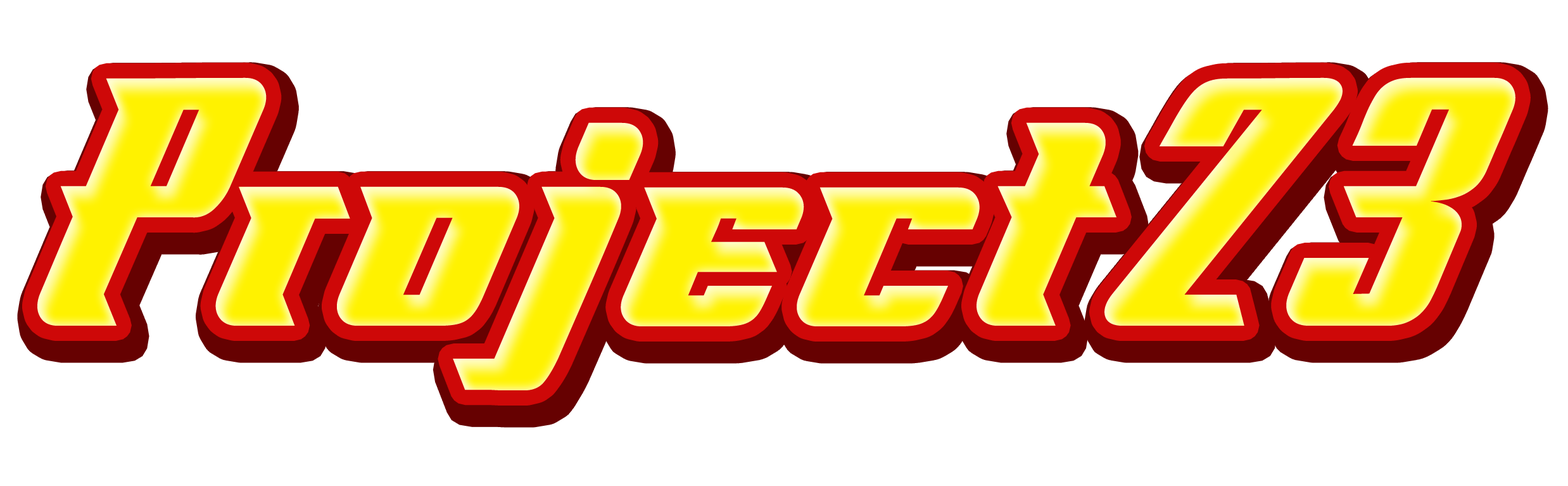
<style>
.page{position:relative;width:1568px;height:486px;background:#ffffff}
.page>*{position:absolute;margin:0}
.t1{font:375.8px "FlyboyBB"}
</style>
<div class="page">
<p class="t1" style="left:37px;top:77px;width:1478px;height:313px">Project23</p>
</div>
